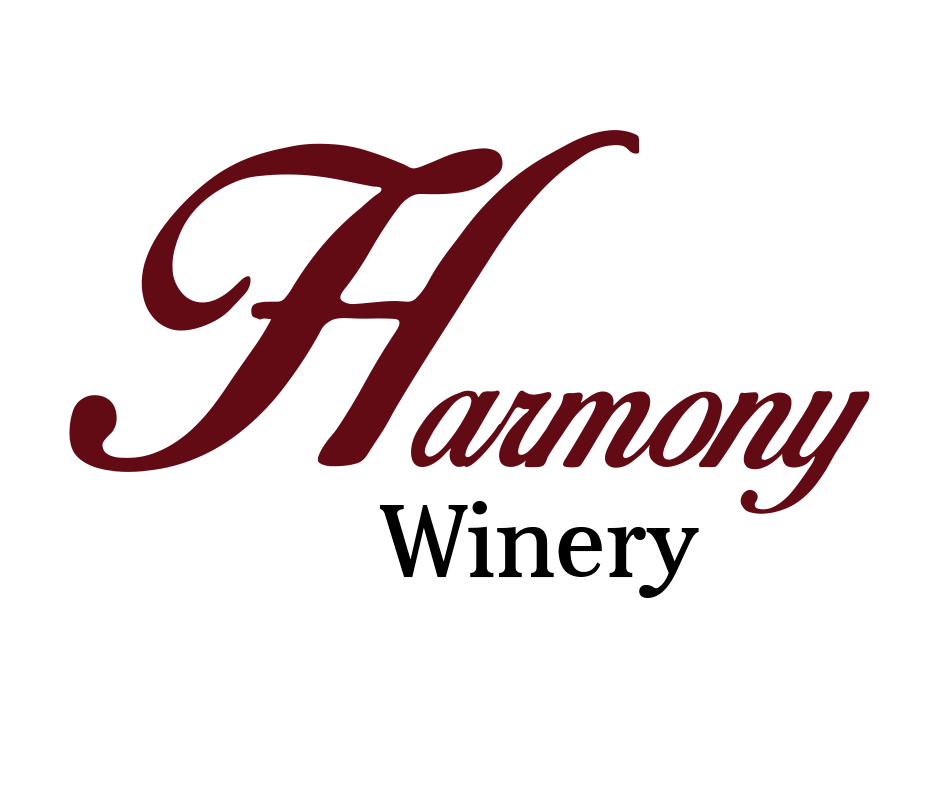
<style>
.page{position:relative;width:933px;height:804px;background:#ffffff}
.page>*{position:absolute;margin:0}
.t1{font:183.3px "BirdsofParadise";color:#630b15}
.t2{font:404.2px "BirdsofParadise";letter-spacing:-0.46em;color:#630b15}
.t3{font:104.2px "Aver";color:#000000}
</style>
<div class="page">
<p class="t1" style="left:69px;top:130px;width:801px;height:384px"><span class="t2">H</span>armony</p>
<p class="t3" style="left:379px;top:501px;width:320px;height:97px">Winery</p>
</div>
